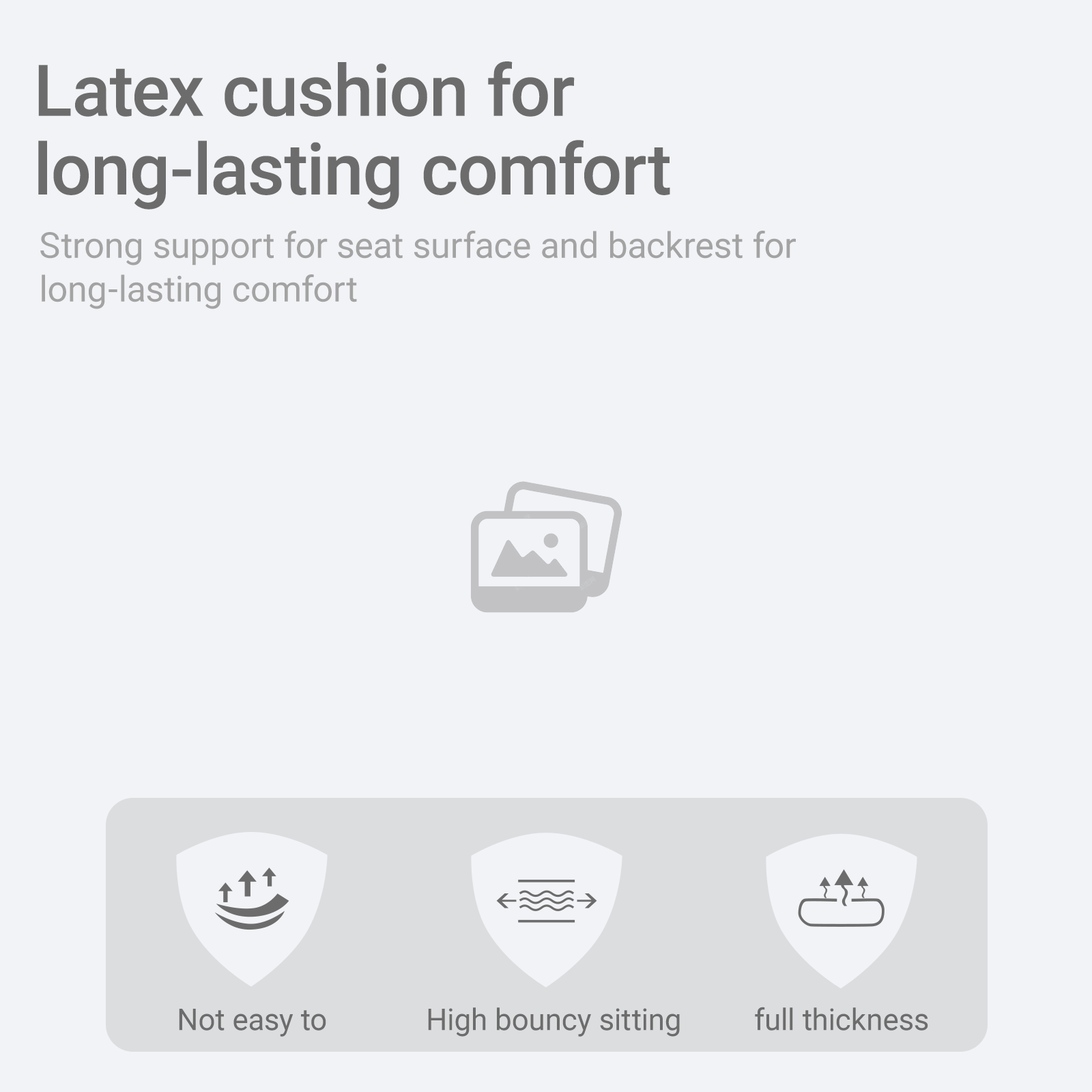
<style>
.page{position:relative;width:1092px;height:1092px;background:#f2f3f6}
.page>*{position:absolute;margin:0}
.t1{font:71.3px/78.6px "Roboto-Medium";color:#6c6c6c}
.t2{font:35.7px/43.7px "Roboto-Regular";color:#a3a3a3}
.t3{font:30px "Roboto-Regular";color:#6c6c6c}
</style>
<div class="page">
<p class="t1" style="left:38px;top:61px;width:632px;height:149px">Latex cushion for<br>long-lasting comfort</p>
<p class="t2" style="left:40px;top:231px;width:756px;height:78px">Strong support for seat surface and backrest for <br>long-lasting comfort</p>
<p class="t3" style="left:179px;top:1009px;width:147px;height:28px">Not easy to</p>
<p class="t3" style="left:428px;top:1007px;width:252px;height:30px">High bouncy sitting</p>
<p class="t3" style="left:755px;top:1007px;width:173px;height:24px">full thickness</p>
</div>
